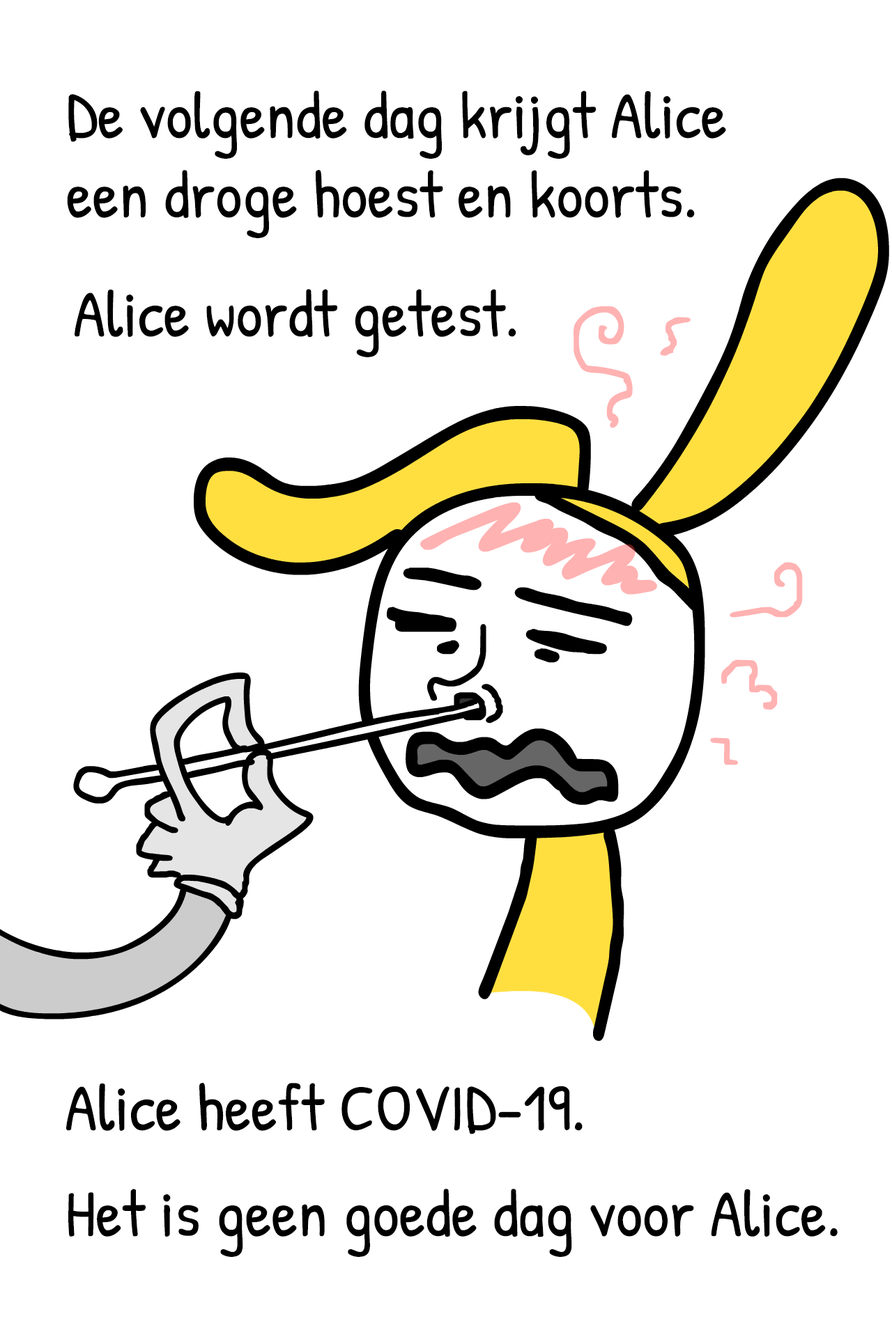
<style>
.page{position:relative;width:892px;height:1337px;background:#ffffff}
.page>*{position:absolute;margin:0}
.t1{font:66.2px "PatrickHand-Regular";color:#000000}
.t2{font:66.2px/105.9px "PatrickHand-Regular";color:#000000}
</style>
<div class="page">
<p class="t1" style="left:67px;top:91px;width:659px;height:147px">De volgende dag krijgt Alice<br>een droge hoest en koorts.</p>
<p class="t1" style="left:75px;top:289px;width:441px;height:68px">Alice wordt getest.</p>
<p class="t2" style="left:66px;top:1083px;width:771px;height:174px">Alice heeft COVID-19.<br>Het is geen goede dag voor Alice.</p>
</div>
